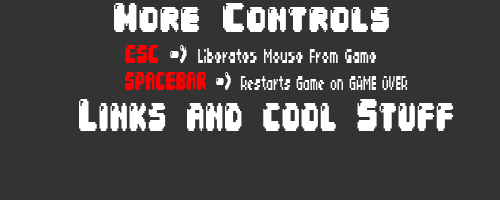
<style>
.page{position:relative;width:500px;height:200px;background:#333333}
.page>*{position:absolute;margin:0}
.t1{font:35.1px "04b30";color:#ffffff;scale:0.72 1}
.t2{font:22.4px "04b03";color:#ffffff;scale:0.55 1}
.t3{font:22.4px "04b30";color:#ff0000;scale:0.55 1}
.t4{font:22.4px "04b30";color:#ffffff;scale:0.55 1}
.t5{font:22.4px "04b03";color:#ffffff;scale:0.49 1}
.t6{font:22.4px "04b30";color:#ff0000;scale:0.49 1}
.t7{font:22.4px "04b30";color:#ffffff;scale:0.49 1}
.t8{font:38.9px "04b30";color:#ffffff;scale:0.6 1}
</style>
<div class="page">
<p class="t1" style="left:114px;top:3px;width:275px;height:29px">More Controls</p>
<p class="t2" style="left:125px;top:45px;width:251px;height:18px"><span class="t3">ESC</span><span class="t4"> -&gt; </span>Liberates Mouse From Game</p>
<p class="t5" style="left:125px;top:72px;width:283px;height:18px"><span class="t6">SPACEBAR</span><span class="t7"> -&gt; </span>Restarts Game on GAME OVER</p>
<p class="t8" style="left:79px;top:99px;width:375px;height:32px">Links and cool Stuff</p>
</div>
